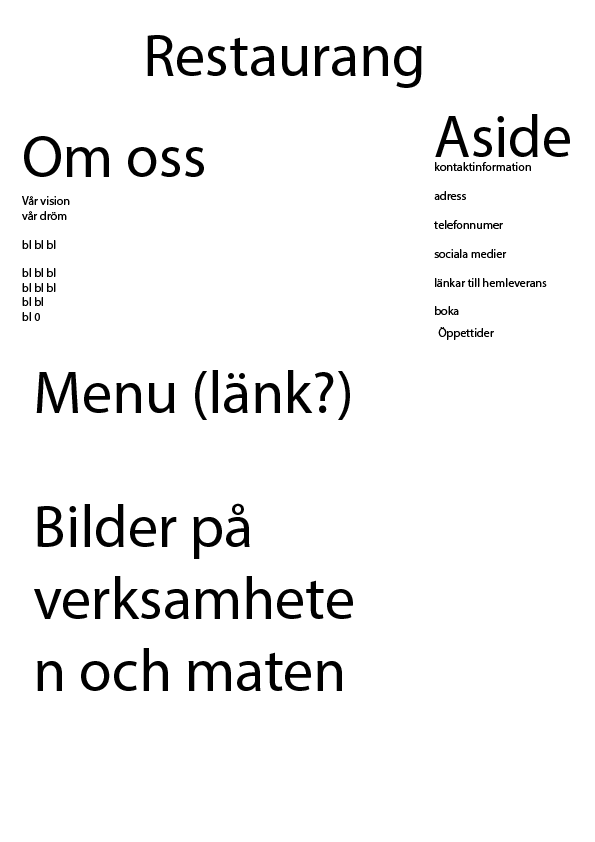
<style>
.page{position:relative;width:595px;height:842px;background:#ffffff}
.page>*{position:absolute;margin:0}
.t1{font:60px "MyriadPro-Regular";color:#000000}
.t2{font:12px "MyriadPro-Regular";color:#000000}
</style>
<div class="page">
<p class="t1" style="left:147px;top:35px;width:275px;height:53px">Restaurang</p>
<p class="t2" style="left:434px;top:114px;width:136px;height:201px"><span class="t1">Aside <br></span>kontaktinformation <br><br>adress <br><br>telefonnumer <br><br>sociala medier <br><br>länkar till hemleverans <br><br>boka</p>
<p class="t2" style="left:22px;top:136px;width:182px;height:185px"><span class="t1">Om oss<br></span><br>Vår vision <br>vår dröm <br><br>bl bl bl <br><br>bl bl bl <br>bl bl bl <br>bl bl <br>bl 0</p>
<p class="t2" style="left:438px;top:327px;width:56px;height:13px">Öppettider</p>
<p class="t1" style="left:36px;top:370px;width:314px;height:50px">Menu (länk?)</p>
<p class="t1" style="left:34px;top:503px;width:319px;height:188px">Bilder på verksamheten och maten</p>
</div>
